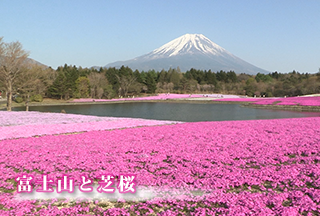
<style>
.page{position:relative;width:320px;height:216px}
.page>*{position:absolute;margin:0}
.t1{font:17px "KozMinPr6N-Heavy";letter-spacing:0.2em;color:#ffffff}
</style>
<div class="page">
<p class="t1" style="left:16px;top:175px;width:119px;height:17px">富士山と芝桜</p>
</div>
